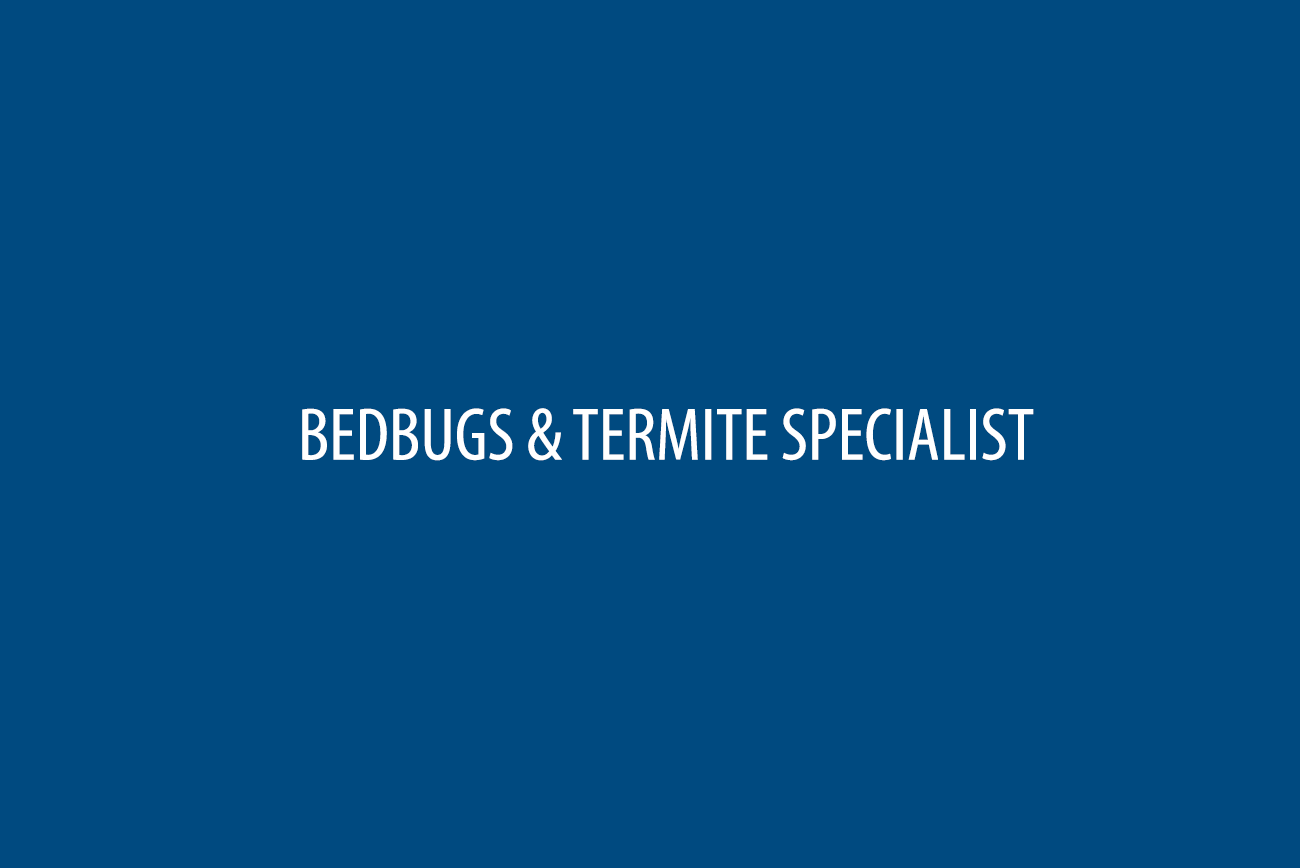
<style>
.page{position:relative;width:1300px;height:868px;background:#004a80}
.page>*{position:absolute;margin:0}
.t1{font:75px "MyriadPro-Cond";color:#ffffff}
</style>
<div class="page">
<p class="t1" style="left:302px;top:408px;width:732px;height:53px">BEDBUGS &amp; TERMITE SPECIALIST</p>
</div>
